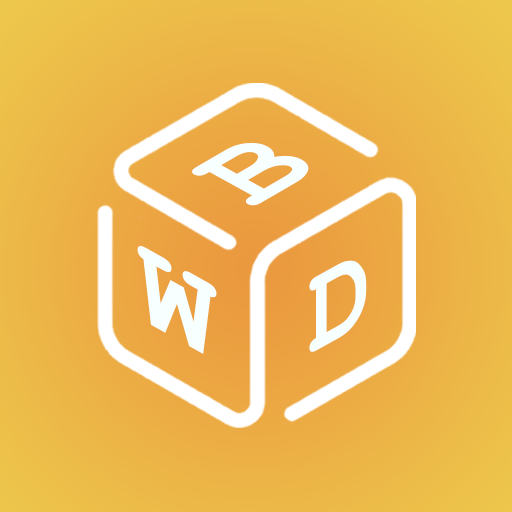
<style>
.page{position:relative;width:512px;height:512px}
.page>*{position:absolute;margin:0}
.t1{font:124.8px "CourierNewPS-BoldMT";color:#f8ffff;scale:1.08 1}
.t2{font:124.8px "CourierNewPS-BoldMT";color:#f8ffff;scale:1.16 1}
.t3{font:124.8px "CourierNewPS-BoldMT";color:#f8ffff;scale:0.97 1}
</style>
<div class="page">
<p class="t1" style="left:192px;top:143px;width:117px;height:63px;rotate:-30deg">B</p>
<p class="t2" style="left:137px;top:246px;width:80px;height:108px;rotate:29deg">W</p>
<p class="t3" style="left:309px;top:260px;width:58px;height:92px;rotate:-29deg">D</p>
</div>
